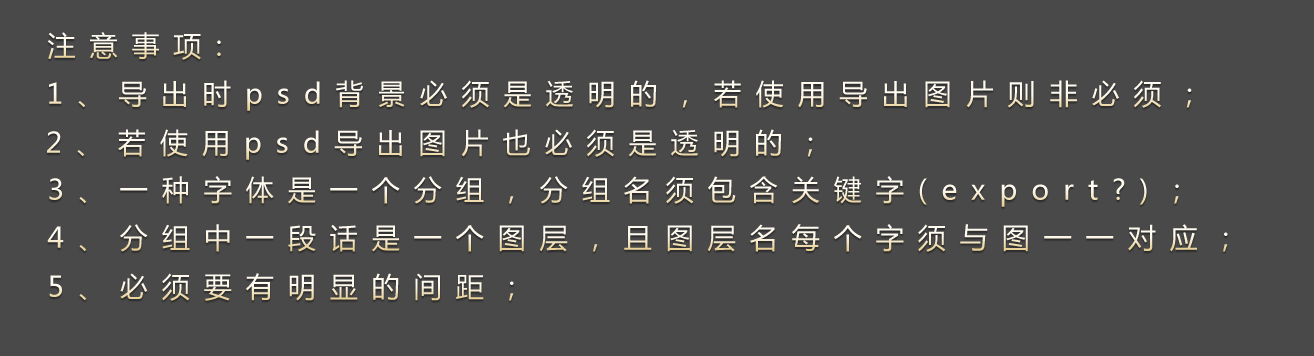
<style>
.page{position:relative;width:1314px;height:356px;background:#494949}
.page>*{position:absolute;margin:0}
.t1{font:28px "MicrosoftYaHei";letter-spacing:0.5em}
.t2{font:28px "MicrosoftYaHei";letter-spacing:0.5em;color:#fef9ed}
</style>
<div class="page">
<p class="t1" style="left:47px;top:32px;width:174px;height:28px">注意事项:</p>
<p class="t1" style="left:49px;top:80px;width:1143px;height:31px">1、导出时psd背景必须是透明的，若使用导出图片则非必须；</p>
<p class="t1" style="left:47px;top:129px;width:766px;height:31px">2、若使用psd导出图片也必须是透明的；</p>
<p class="t2" style="left:49px;top:176px;width:1130px;height:31px">3、一种字体是一个分组，分组名须包含关键字(export?)；</p>
<p class="t1" style="left:47px;top:224px;width:1181px;height:28px">4、分组中一段话是一个图层，且图层名每个字须与图一一对应；</p>
<p class="t1" style="left:49px;top:273px;width:465px;height:28px">5、必须要有明显的间距；</p>
</div>
